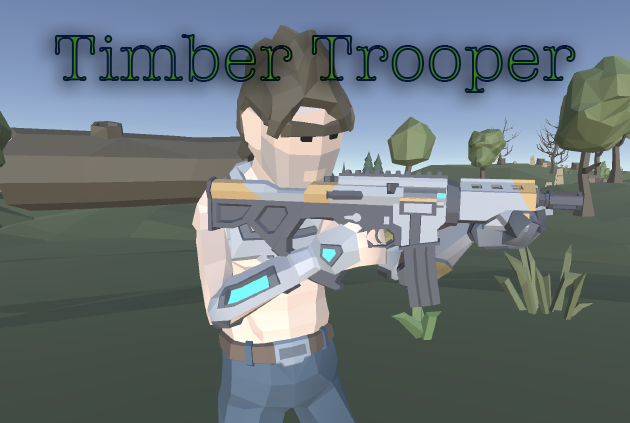
<style>
.page{position:relative;width:630px;height:423px}
.page>*{position:absolute;margin:0}
.t1{font:69.1px "AmericanTypewriter"}
</style>
<div class="page">
<p class="t1" style="left:54px;top:34px;width:522px;height:59px">Timber Trooper</p>
</div>
